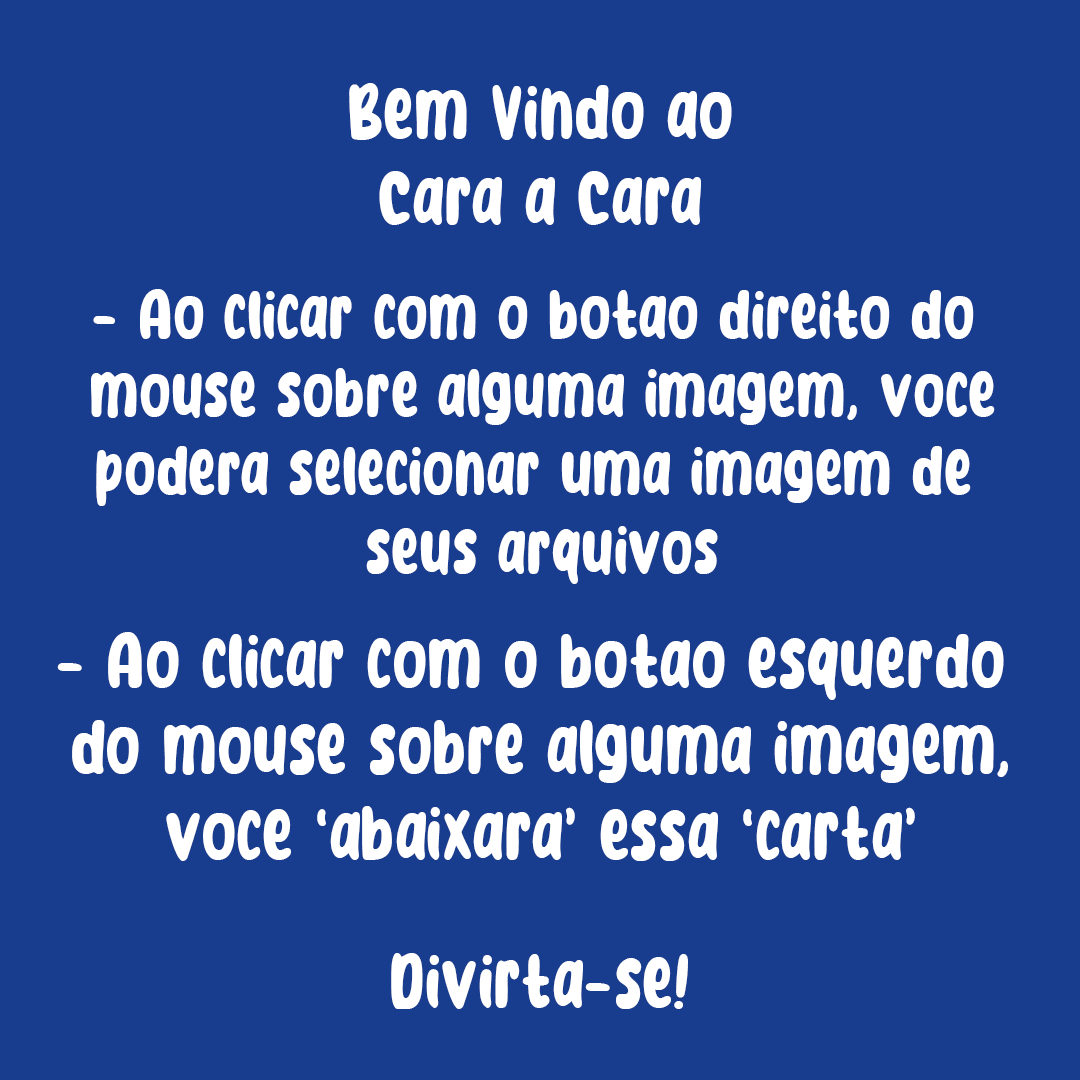
<style>
.page{position:relative;width:1080px;height:1080px;background:#193d8e}
.page>*{position:absolute;margin:0}
.t1{font:72px "Nice-Honey";color:#ffffff}
.t2{font:65.3px "Nice-Honey";color:#ffffff}
</style>
<div class="page">
<p class="t1" style="left:349px;top:83px;width:383px;height:142px;text-align:center">Bem Vindo ao<br>Cara a Cara</p>
<p class="t2" style="left:91px;top:289px;width:904px;height:295px;text-align:center">- Ao clicar com o botao direito do <br>mouse sobre alguma imagem, voce<br>podera selecionar uma imagem de <br>seus arquivos</p>
<p class="t1" style="left:57px;top:632px;width:951px;height:229px;text-align:center">- Ao clicar com o botao esquerdo <br>do mouse sobre alguma imagem,<br>voce ‘abaixara’ essa ‘carta’</p>
<p class="t1" style="left:391px;top:953px;width:297px;height:56px">Divirta-se!</p>
</div>
